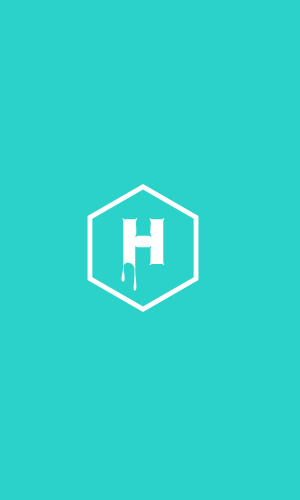
<style>
.page{position:relative;width:300px;height:500px;background:#2ad2c9}
.page>*{position:absolute;margin:0}
.t1{font:68.7px "Nosifer-Regular";color:#eef5f5;scale:0.74 1}
</style>
<div class="page">
<p class="t1" style="left:121px;top:218px;width:44px;height:73px">H</p>
</div>
